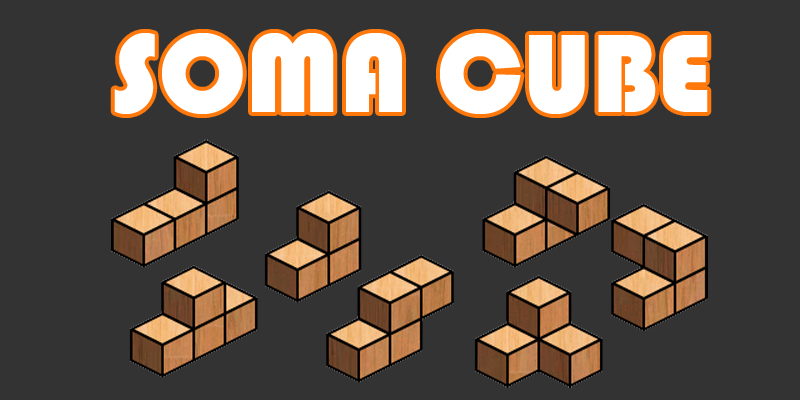
<style>
.page{position:relative;width:800px;height:400px;background:#333333}
.page>*{position:absolute;margin:0}
.t1{font:115.3px "Bauhaus93";color:#ffffff}
</style>
<div class="page">
<p class="t1" style="left:114px;top:33px;width:594px;height:81px">SOMA CUBE</p>
</div>
